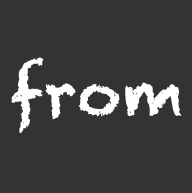
<style>
.page{position:relative;width:192px;height:193px;background:#333333}
.page>*{position:absolute;margin:0}
.t1{font:60px "Chalkduster";color:#ffffff;font-weight:bold}
</style>
<div class="page">
<p class="t1" style="left:11px;top:57px;width:171px;height:76px">fromn</p>
</div>
